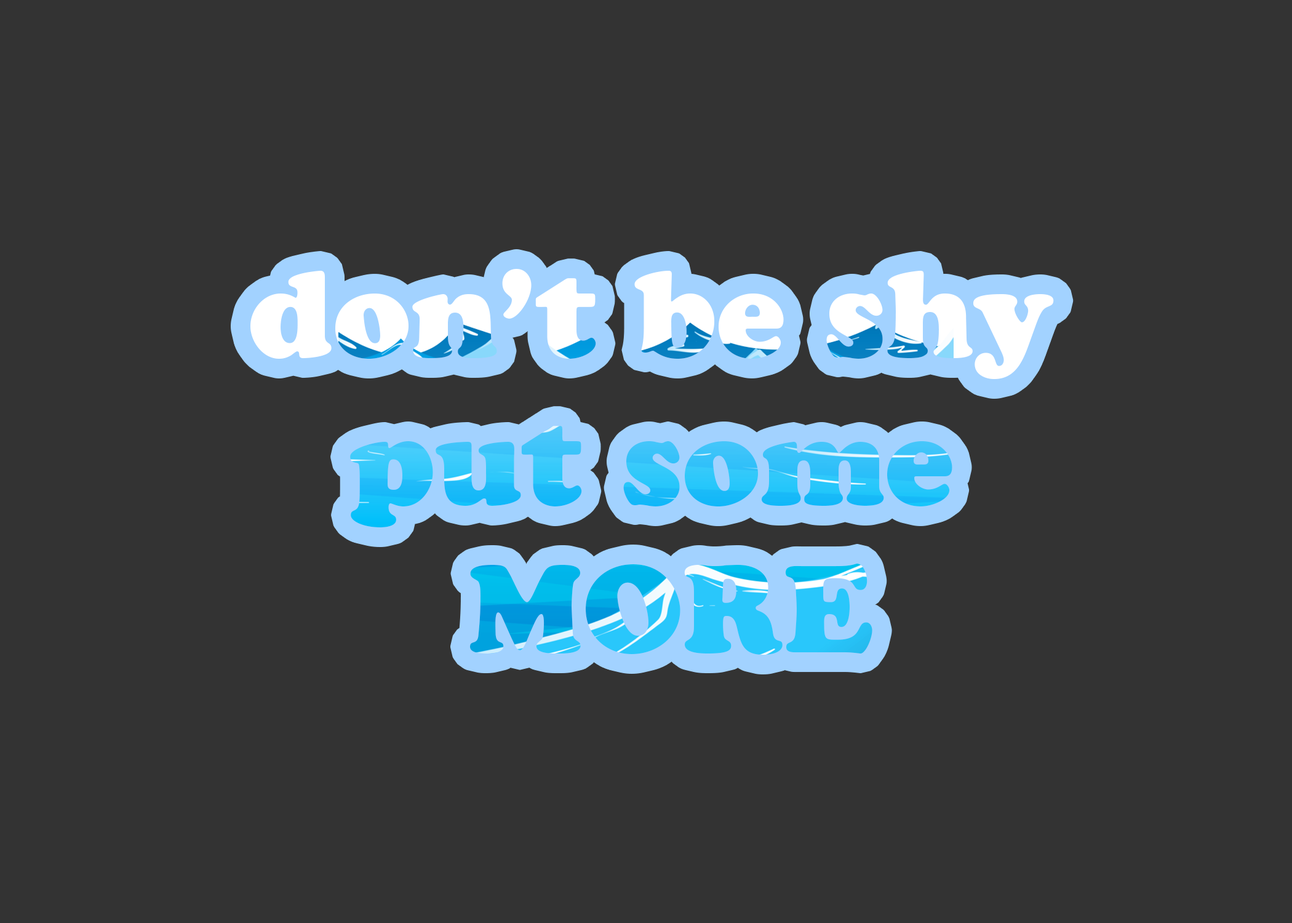
<style>
.page{position:relative;width:1292px;height:923px;background:#333333}
.page>*{position:absolute;margin:0}
.t1{font:123.1px "CooperBlackStd"}
</style>
<div class="page">
<p class="t1" style="left:250px;top:269px;width:804px;height:386px;text-align:center">don’t be shy <br>put some <br>MORE</p>
</div>
